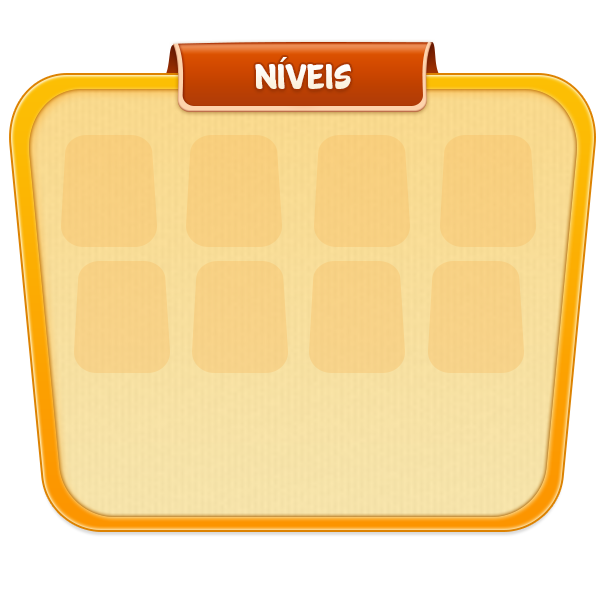
<style>
.page{position:relative;width:600px;height:600px;background:#ffffff}
.page>*{position:absolute;margin:0}
.t1{font:35.7px "Cartwheel";color:#ffffff;scale:1.05 1}
.t2{font:35.7px "MyriadPro-Regular";color:#ffffff;scale:1.05 1}
</style>
<div class="page">
<p class="t1" style="left:255px;top:64px;width:96px;height:25px">NIVEIS</p>
<p class="t2" style="left:280px;top:57px;width:7px;height:5px">´</p>
</div>
